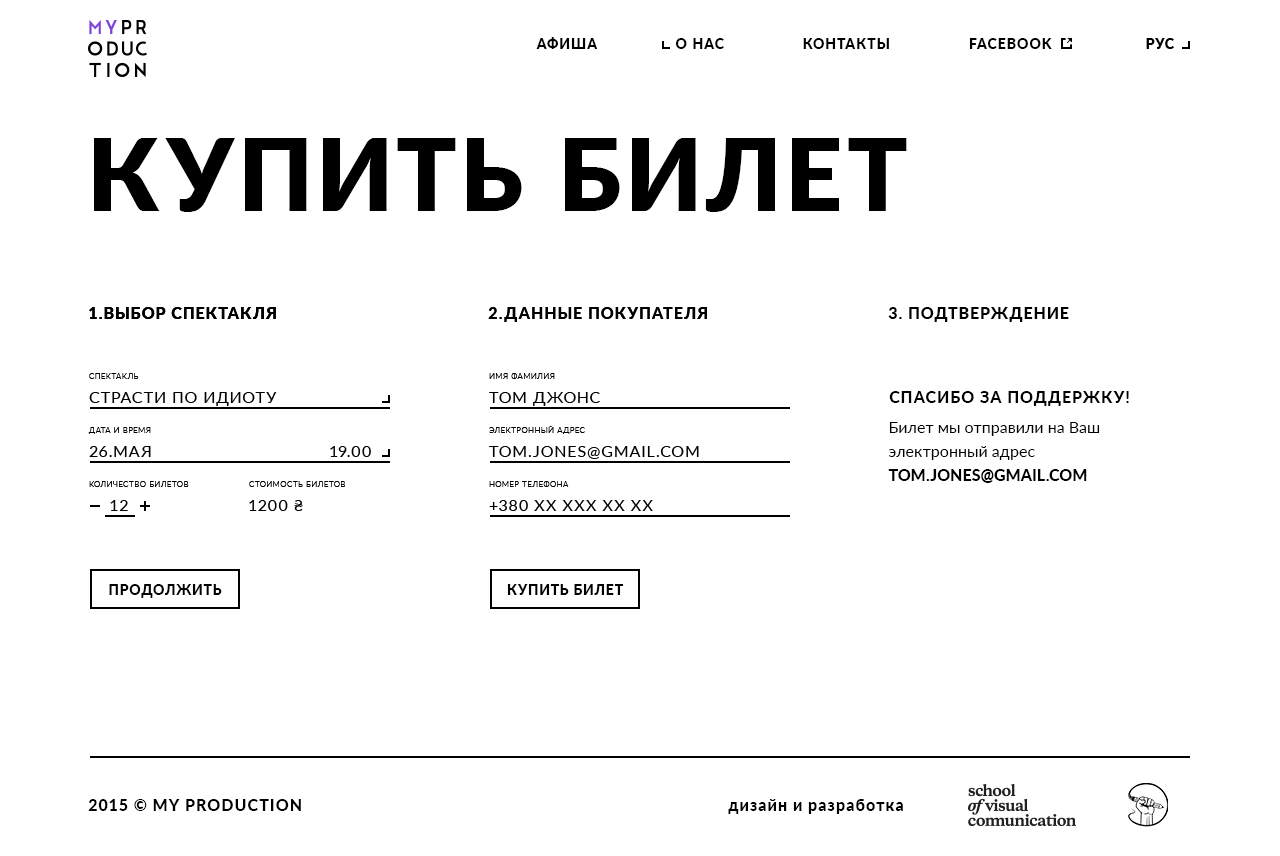
<style>
.page{position:relative;width:1280px;height:856px;background:#ffffff}
.page>*{position:absolute;margin:0}
.t1{font:14px "Lato-Heavy";letter-spacing:0.08em;color:#000000}
.t2{font:14px "Lato-Heavy";letter-spacing:0.06em;color:#000000}
.t3{font:100px "Lato-Black";letter-spacing:0.06em;color:#000000}
.t4{font:16px "Lato-Heavy";letter-spacing:0.06em;color:#000000}
.t5{font:8px "Lato-Light";letter-spacing:0.06em;color:#010101}
.t6{font:16px "Lato-Regular";letter-spacing:0.06em;color:#010101}
.t7{font:16px/24px "Lato-Regular";color:#000000}
.t8{font:16px/24px "Lato-Heavy";color:#000000}
.t9{font:14px "Lato-Heavy";letter-spacing:0.06em;color:#010101;text-transform:uppercase}
</style>
<div class="page">
<p class="t1" style="left:536px;top:37px;width:62px;height:12px">АФИША</p>
<p class="t1" style="left:675px;top:38px;width:49px;height:11px">О НАС</p>
<p class="t1" style="left:803px;top:38px;width:86px;height:11px">КОНТАКТЫ</p>
<p class="t1" style="left:969px;top:38px;width:83px;height:11px">FACEBOOK</p>
<p class="t2" style="left:1146px;top:38px;width:28px;height:11px">РУС</p>
<p class="t3" style="left:94px;top:138px;width:813px;height:74px">КУПИТЬ БИЛЕТ</p>
<p class="t4" style="left:89px;top:307px;width:187px;height:12px">1.ВЫБОР СПЕКТАКЛЯ</p>
<p class="t4" style="left:89px;top:307px;width:187px;height:12px">1.ВЫБОР СПЕКТАКЛЯ</p>
<p class="t4" style="left:89px;top:307px;width:187px;height:12px">1.ВЫБОР СПЕКТАКЛЯ</p>
<p class="t4" style="left:488px;top:307px;width:219px;height:15px">2.ДАННЫЕ ПОКУПАТЕЛЯ</p>
<p class="t4" style="left:488px;top:307px;width:219px;height:15px">2.ДАННЫЕ ПОКУПАТЕЛЯ</p>
<p class="t4" style="left:488px;top:307px;width:219px;height:15px">2.ДАННЫЕ ПОКУПАТЕЛЯ</p>
<p class="t4" style="left:888px;top:307px;width:181px;height:15px">3. ПОДТВЕРЖДЕНИЕ</p>
<p class="t4" style="left:888px;top:307px;width:181px;height:15px">3. ПОДТВЕРЖДЕНИЕ</p>
<p class="t4" style="left:888px;top:307px;width:181px;height:15px">3. ПОДТВЕРЖДЕНИЕ</p>
<p class="t5" style="left:89px;top:373px;width:50px;height:6px">СПЕКТАКЛЬ</p>
<p class="t5" style="left:489px;top:373px;width:66px;height:6px">ИМЯ ФАМИЛИЯ</p>
<p class="t6" style="left:89px;top:392px;width:188px;height:14px">СТРАСТИ ПО ИДИОТУ</p>
<p class="t6" style="left:489px;top:392px;width:111px;height:14px">ТОМ ДЖОНС</p>
<p class="t4" style="left:889px;top:391px;width:240px;height:15px">СПАСИБО ЗА ПОДДЕРЖКУ!</p>
<p class="t7" style="left:888px;top:422px;width:212px;height:61px">Билет мы отправили на Ваш электронный адрес <span class="t8">TOM.JONES@GMAIL.COM</span></p>
<p class="t5" style="left:88px;top:427px;width:63px;height:7px">ДАТА И ВРЕМЯ</p>
<p class="t5" style="left:489px;top:426px;width:96px;height:8px">ЭЛЕКТРОННЫЙ АДРЕС</p>
<p class="t6" style="left:89px;top:446px;width:62px;height:11px">26.МАЯ</p>
<p class="t6" style="left:330px;top:446px;width:41px;height:11px">19.00</p>
<p class="t6" style="left:489px;top:446px;width:210px;height:13px">TOM.JONES@GMAIL.COM</p>
<p class="t5" style="left:89px;top:481px;width:100px;height:6px">КОЛИЧЕСТВО БИЛЕТОВ</p>
<p class="t5" style="left:249px;top:481px;width:96px;height:6px">СТОИМОСТЬ БИЛЕТОВ</p>
<p class="t5" style="left:489px;top:481px;width:80px;height:6px">НОМЕР ТЕЛЕФОНА</p>
<p class="t6" style="left:110px;top:500px;width:18px;height:11px">12</p>
<p class="t6" style="left:249px;top:500px;width:54px;height:11px">1200 ₴</p>
<p class="t6" style="left:489px;top:500px;width:164px;height:11px">+380 XX XXX XX XX</p>
<p class="t9" style="left:109px;top:584px;width:113px;height:14px">ПРОДОЛЖИТЬ</p>
<p class="t9" style="left:507px;top:584px;width:117px;height:11px">КУПИТЬ БИЛЕТ</p>
<p class="t4" style="left:88px;top:799px;width:213px;height:12px">2015 © MY PRODUCTION</p>
<p class="t4" style="left:728px;top:799px;width:175px;height:15px">дизайн и разработка</p>
</div>
